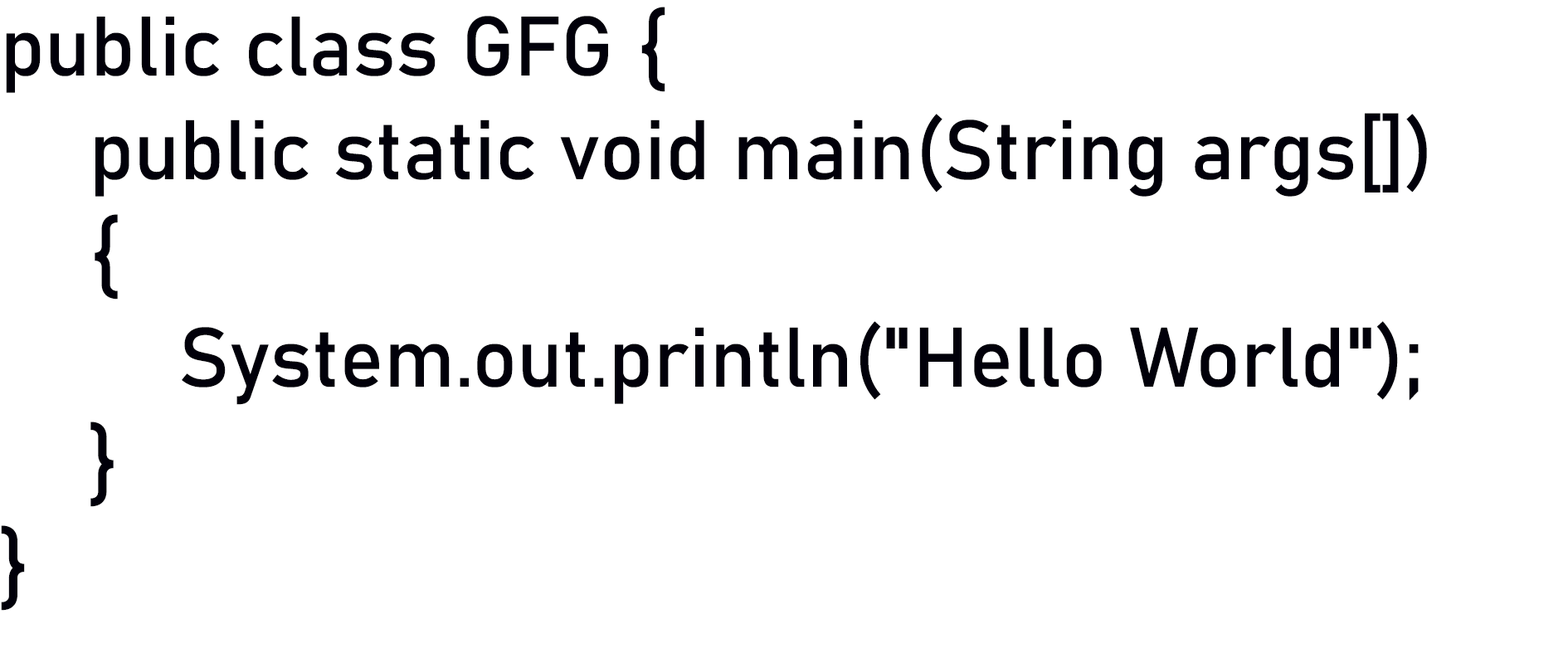
<style>
.page{position:relative;width:1568px;height:658px;background:#ffffff}
.page>*{position:absolute;margin:0}
.t1{font:83px/34.6px "Bahnschrift";color:#01000a}
</style>
<div class="page">
<p class="t1" style="left:1px;top:7px;width:1426px;height:604px">public class GFG { <br><br><br>    public static void main(String args[]) <br><br><br>    { <br><br><br>        System.out.println("Hello World"); <br><br><br>    } <br><br><br>}</p>
</div>
